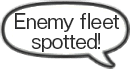
<style>
.page{position:relative;width:130px;height:69px;background:#ffffff}
.page>*{position:absolute;margin:0}
.t1{font:19px/20px "GothicMB101Pro-Regular";letter-spacing:-0.04em;color:#2a2a2a}
</style>
<div class="page">
<p class="t1" style="left:15px;top:13px;width:104px;height:39px;text-align:center">Enemy fleet<br>spotted!</p>
</div>
